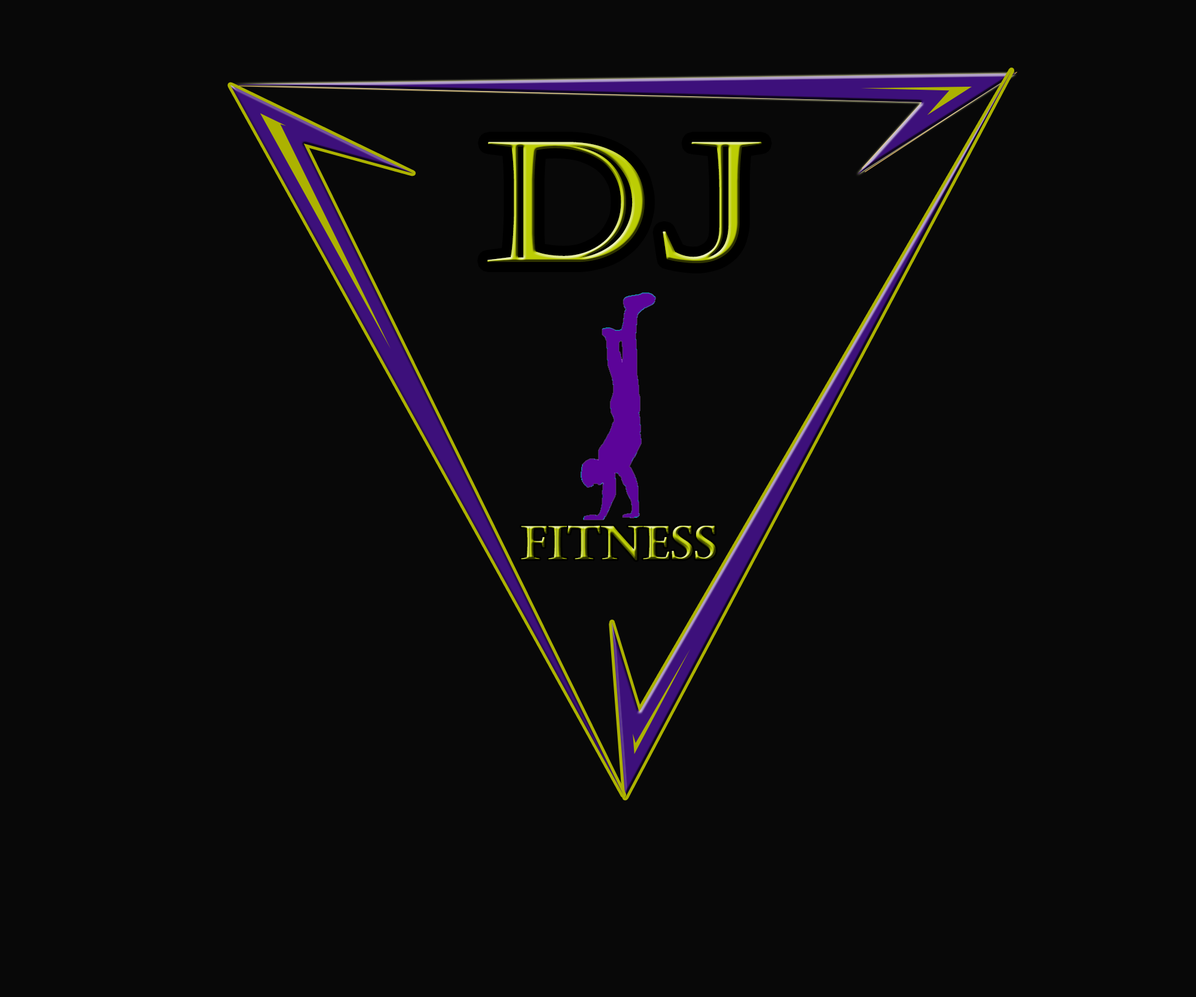
<style>
.page{position:relative;width:1196px;height:997px;background:#080808}
.page>*{position:absolute;margin:0}
.t1{font:166.1px "Castellar";font-weight:bold;scale:1.16 1}
.t2{font:45.5px "Castellar";font-weight:bold}
</style>
<div class="page">
<p class="t1" style="left:487px;top:142px;width:275px;height:121px">DJ</p>
<p class="t2" style="left:521px;top:526px;width:195px;height:34px">Fitness</p>
</div>
